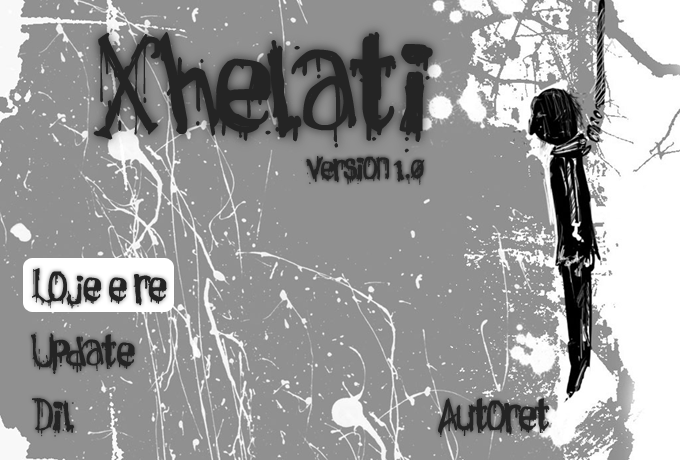
<style>
.page{position:relative;width:680px;height:460px;background:#909090}
.page>*{position:absolute;margin:0}
.t1{font:109.4px "Necropsy";color:#242424;scale:0.9 1}
.t2{font:26.2px "Necropsy";color:#242424;scale:0.9 1}
.t3{font:35px "Necropsy";color:#242424;scale:0.9 1}
</style>
<div class="page">
<p class="t1" style="left:93px;top:32px;width:340px;height:121px">Xhelati</p>
<p class="t2" style="left:301px;top:156px;width:124px;height:29px">version 1.0</p>
<p class="t3" style="left:32px;top:268px;width:135px;height:41px">Loje e re</p>
<p class="t3" style="left:31px;top:332px;width:104px;height:42px">Update</p>
<p class="t3" style="left:32px;top:398px;width:43px;height:39px">Dil</p>
<p class="t3" style="left:438px;top:398px;width:112px;height:39px">Autoret</p>
</div>
